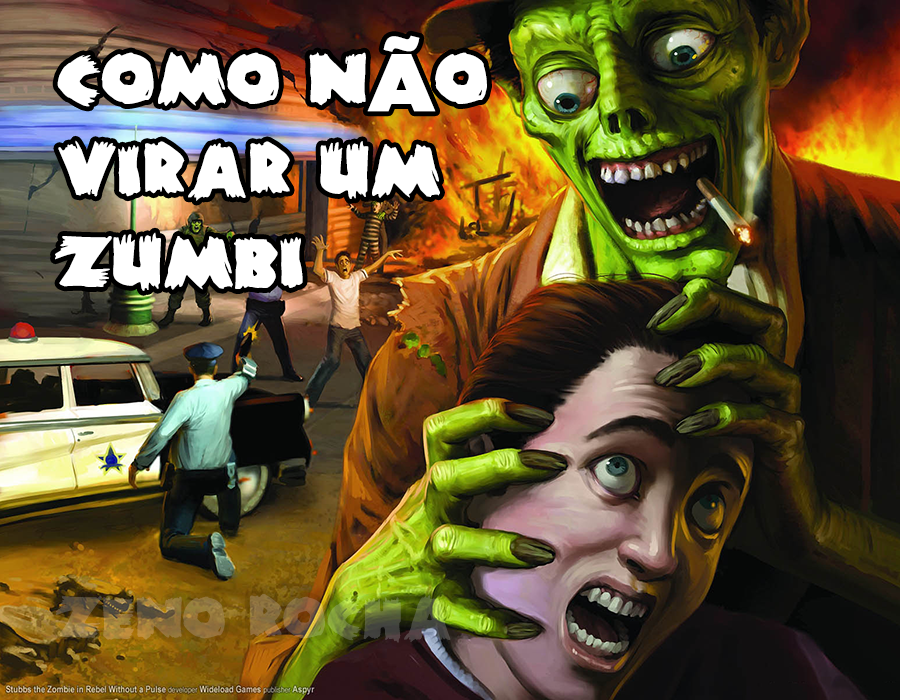
<style>
.page{position:relative;width:900px;height:700px}
.page>*{position:absolute;margin:0}
.t1{font:80.8px/91.8px "ZombieA";color:#ffffff;font-weight:bold}
.t2{font:80.8px/91.8px "GothamUltra";color:#ffffff;font-weight:bold}
.t3{font:65.7px "ZombieA";font-weight:bold}
</style>
<div class="page">
<p class="t1" style="left:55px;top:35px;width:432px;height:256px">COMO N<span class="t2">Ã</span>O<br>VIRAR UM<br>ZUMBI</p>
<p class="t3" style="left:55px;top:594px;width:396px;height:49px">ZENO ROCHA</p>
</div>
